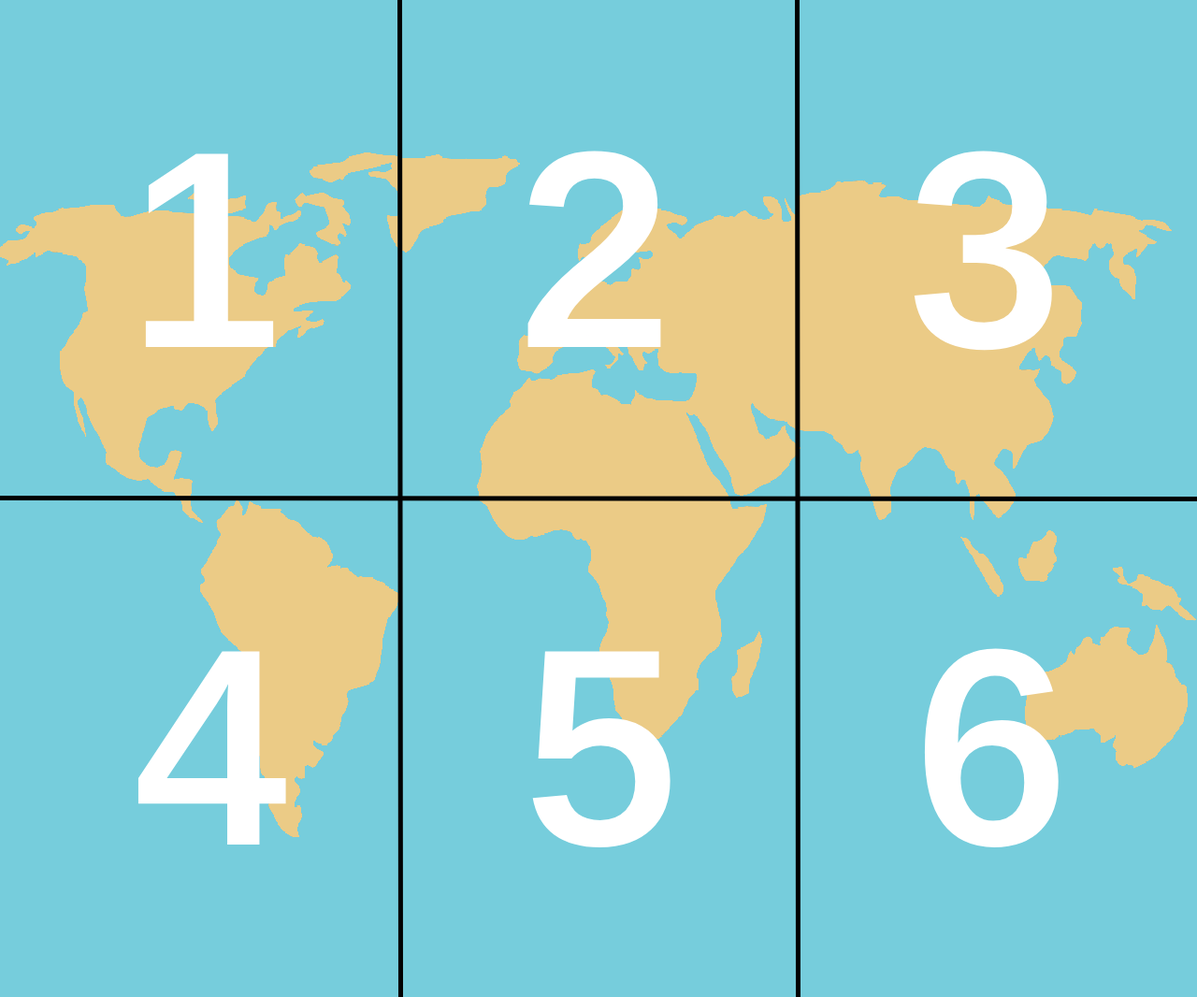
<style>
.page{position:relative;width:1197px;height:997px;background:#76cddc}
.page>*{position:absolute;margin:0}
.t1{font:280.4px "Arimo-SemiBold";color:#ffffff}
</style>
<div class="page">
<p class="t1" style="left:145px;top:151px;width:907px;height:200px">1   2   3</p>
<p class="t1" style="left:137px;top:648px;width:921px;height:199px">4   5   6</p>
</div>
